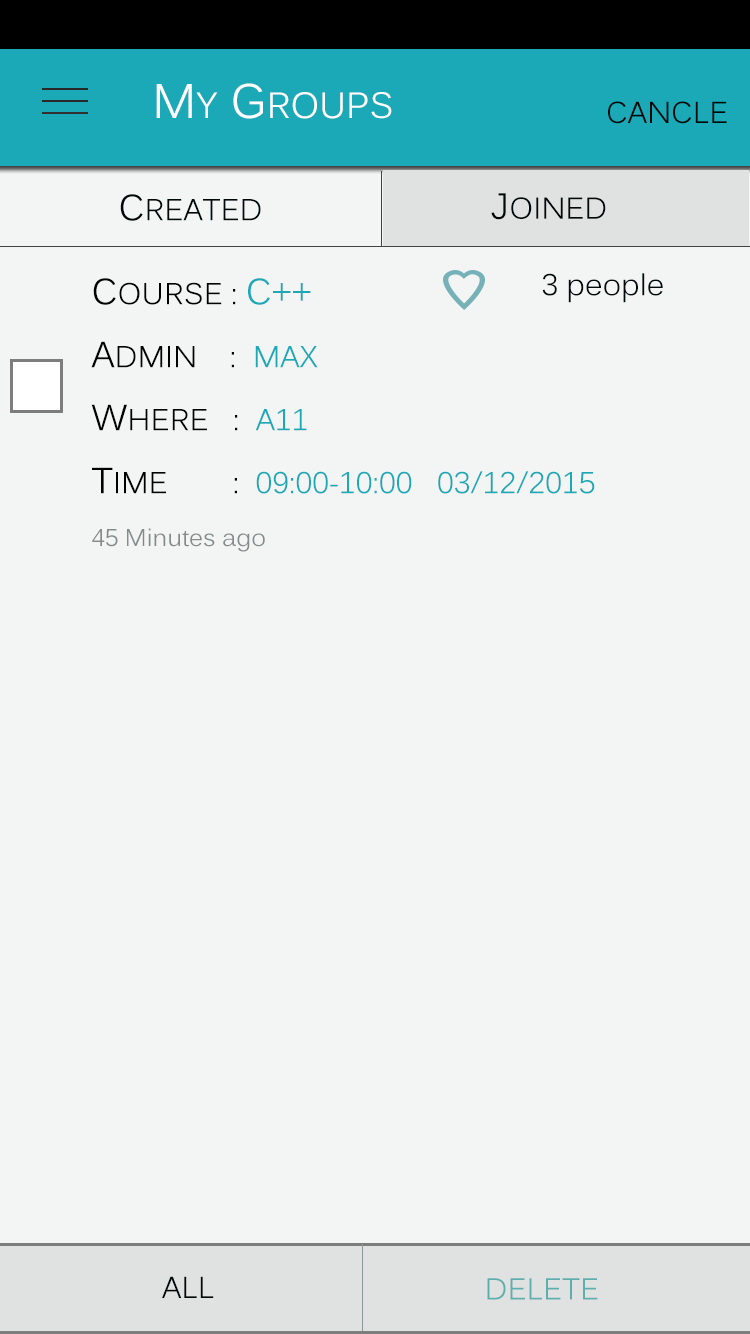
<style>
.page{position:relative;width:750px;height:1334px;background:#f3f5f5}
.page>*{position:absolute;margin:0}
.t1{font:36px "Kalinga";color:#ffffff}
.t2{font:48px "Kalinga";color:#ffffff}
.t3{font:30px "Kalinga";color:#000808}
.t4{font:36px "Kalinga";color:#000808}
.t5{font:30px "Kalinga";color:#1ba9b7}
.t6{font:36px "Kalinga";color:#000000}
.t7{font:30px "Kalinga";color:#000000}
.t8{font:36px "Kalinga";color:#1ba9b7}
.t9{font:24px "Kalinga";color:#858a8b}
.t10{font:30px "Kalinga";color:#5faeae}
</style>
<div class="page">
<p class="t1" style="left:156px;top:83px;width:236px;height:36px"><span class="t2">M</span>Y<span class="t2"> G</span>ROUPS</p>
<p class="t3" style="left:608px;top:101px;width:119px;height:23px">CANCLE</p>
<p class="t3" style="left:120px;top:194px;width:141px;height:27px"><span class="t4">C</span>REATED</p>
<p class="t3" style="left:491px;top:193px;width:115px;height:27px"><span class="t4">J</span>OINED</p>
<p class="t5" style="left:91px;top:278px;width:504px;height:274px"><span class="t6">C</span><span class="t7">OURSE : </span><span class="t8">C++<br></span><span class="t6">A</span><span class="t7">DMIN    :  </span>MAX<br><span class="t6">W</span><span class="t7">HERE   :  </span>A11<br><span class="t6">T</span><span class="t7">IME        :  </span>09:00-10:00   03/12/2015<br><span class="t9">45 Minutes ago</span></p>
<p class="t3" style="left:542px;top:273px;width:121px;height:30px">3 people</p>
<p class="t3" style="left:162px;top:1276px;width:52px;height:22px">ALL</p>
<p class="t10" style="left:487px;top:1278px;width:111px;height:22px">DELETE</p>
</div>
